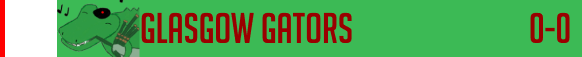
<style>
.page{position:relative;width:582px;height:57px;background:#3cba55}
.page>*{position:absolute;margin:0}
.t1{font:42px "BigNoodleTitling";color:#9a0000}
</style>
<div class="page">
<p class="t1" style="left:141px;top:12px;width:211px;height:31px">Glasgow Gators</p>
<p class="t1" style="left:530px;top:12px;width:40px;height:31px">0-0</p>
</div>
